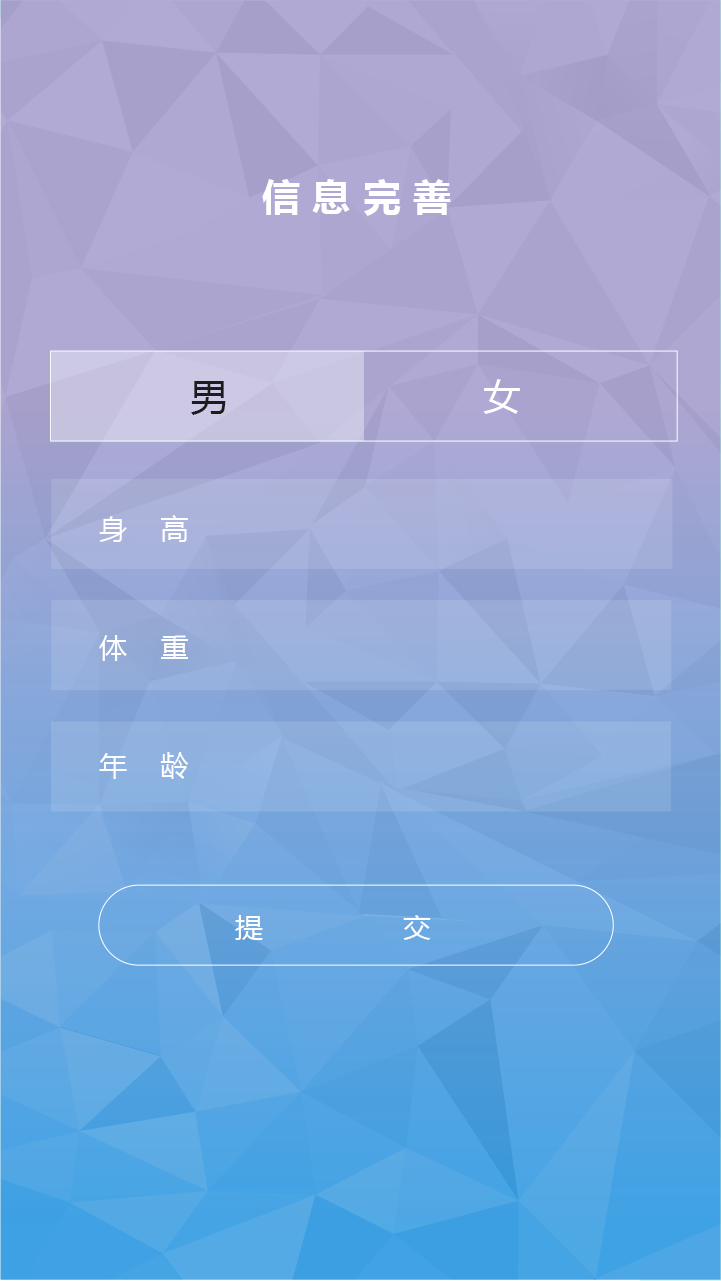
<style>
.page{position:relative;width:721px;height:1281px}
.page>*{position:absolute;margin:0}
.t1{font:38px "MicrosoftYaHei-Bold";letter-spacing:0.32em;color:#ffffff}
.t2{font:38px "MicrosoftYaHei";letter-spacing:0.1em;color:#1c1c1c}
.t3{font:38px "MicrosoftYaHei";letter-spacing:0.1em;color:#ffffff}
.t4{font:28px/118.4px "MicrosoftYaHei";letter-spacing:0.1em;color:#ffffff}
.t5{font:28px "MicrosoftYaHei";color:#ffffff}
</style>
<div class="page">
<p class="t1" style="left:262px;top:179px;width:189px;height:37px">信息完善</p>
<p class="t2" style="left:191px;top:379px;width:329px;height:36px">男<span class="t3">　　　　　　女</span></p>
<p class="t4" style="left:99px;top:515px;width:90px;height:264px">身　高<br>体　重<br>年　龄</p>
<p class="t5" style="left:235px;top:915px;width:196px;height:25px">提　　　　　交</p>
</div>
